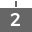
<style>
.page{position:relative;width:32px;height:32px;background:#666666}
.page>*{position:absolute;margin:0}
.t1{font:18px "Montserrat-Regular";color:#ffffff}
</style>
<div class="page">
<p class="t1" style="left:10px;top:13px;width:10px;height:13px">2</p>
</div>
